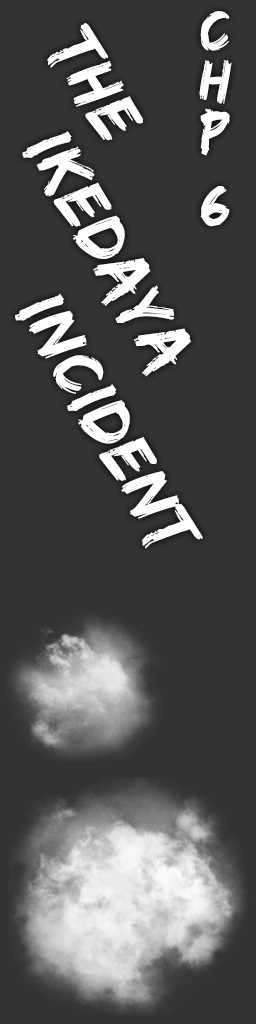
<style>
.page{position:relative;width:256px;height:1024px;background:#333333}
.page>*{position:absolute;margin:0}
.t1{font:60px/25.1px "EdoSZ";letter-spacing:0.03em;color:#ffffff}
.t2{font:72px "EdoSZ";letter-spacing:0.03em;color:#ffffff}
</style>
<div class="page">
<p class="t1" style="left:199px;top:11px;width:33px;height:216px;text-align:center">C<br><br>H<br><br>P<br><br><br>6</p>
<p class="t2" style="left:47px;top:23px;width:96px;height:118px;rotate:60deg">The</p>
<p class="t2" style="left:22px;top:131px;width:169px;height:246px;rotate:60deg">Ikedaya</p>
<p class="t2" style="left:15px;top:293px;width:188px;height:256px;rotate:60deg">Incident</p>
</div>
